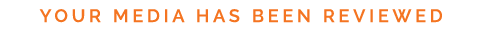
<style>
.page{position:relative;width:483px;height:32px;background:#ffffff}
.page>*{position:absolute;margin:0}
.t1{font:18px "Raleway-SemiBold";letter-spacing:0.21em;color:#f47421;text-transform:uppercase}
</style>
<div class="page">
<p class="t1" style="left:39px;top:9px;width:403px;height:14px">your media has been reviewed</p>
</div>
